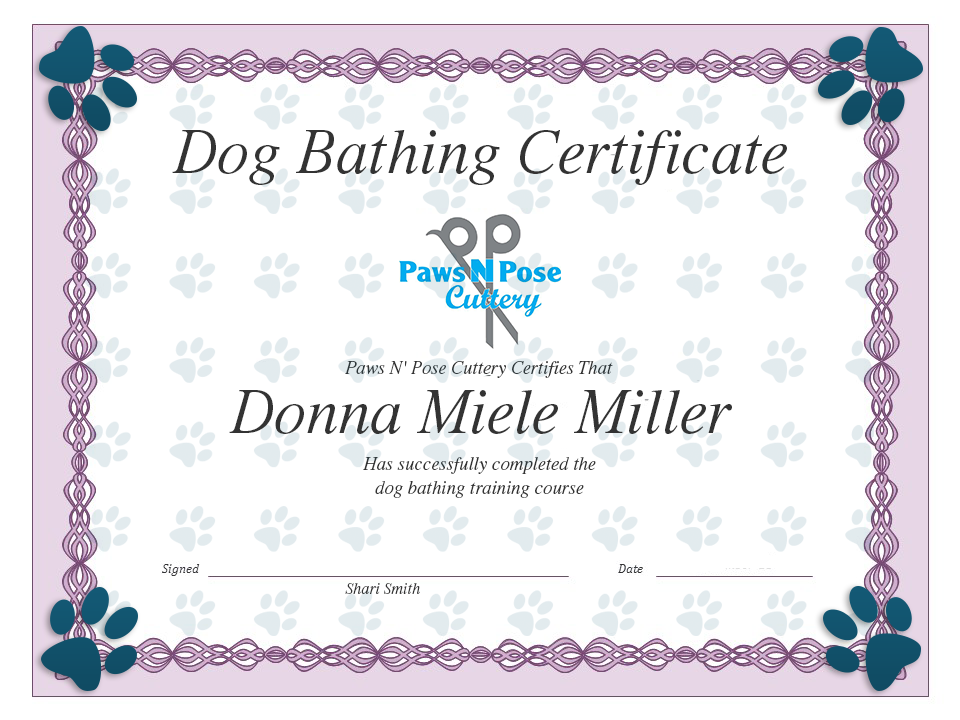
<style>
.page{position:relative;width:960px;height:720px;background:#ffffff}
.page>*{position:absolute;margin:0}
.t1{font:64px "MMTimesItalic";color:#202728}
.t2{font:18.7px "MMTimesItalic";color:#202728}
.t3{font:18.7px/24px "MMTimesItalic";color:#202728}
.t4{font:16px "MMTimesItalic";color:#202728}
</style>
<div class="page">
<p class="t1" style="left:172px;top:130px;width:615px;height:55px">Dog Bathing Certificate</p>
<p class="t2" style="left:345px;top:361px;width:268px;height:17px">Paws N' Pose Cuttery Certifies That</p>
<p class="t1" style="left:229px;top:390px;width:503px;height:44px">Donna Miele Miller</p>
<p class="t3" style="left:363px;top:457px;width:233px;height:41px;text-align:center">Has successfully completed the<br>dog bathing training course</p>
<p class="t4" style="left:345px;top:583px;width:75px;height:11px">Shari Smith</p>
</div>
